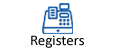
<style>
.page{position:relative;width:114px;height:50px;background:#ffffff}
.page>*{position:absolute;margin:0}
.t1{font:14.5px "Calibri";color:#000000;scale:1.03 1}
</style>
<div class="page">
<p class="t1" style="left:31px;top:35px;width:53px;height:13px">Registers</p>
</div>
